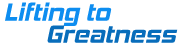
<style>
.page{position:relative;width:180px;height:46px;background:#ffffff}
.page>*{position:absolute;margin:0}
.t1{font:25px/22px "HemiHeadRg-BoldItalic";color:#0d8df0}
.t2{font:25px/22px "HemiHeadRg-BoldItalic";color:#086dbb}
</style>
<div class="page">
<p class="t1" style="left:5px;top:2px;width:173px;height:41px;text-align:center">Lifting to<br>   <span class="t2">Greatness</span></p>
</div>
